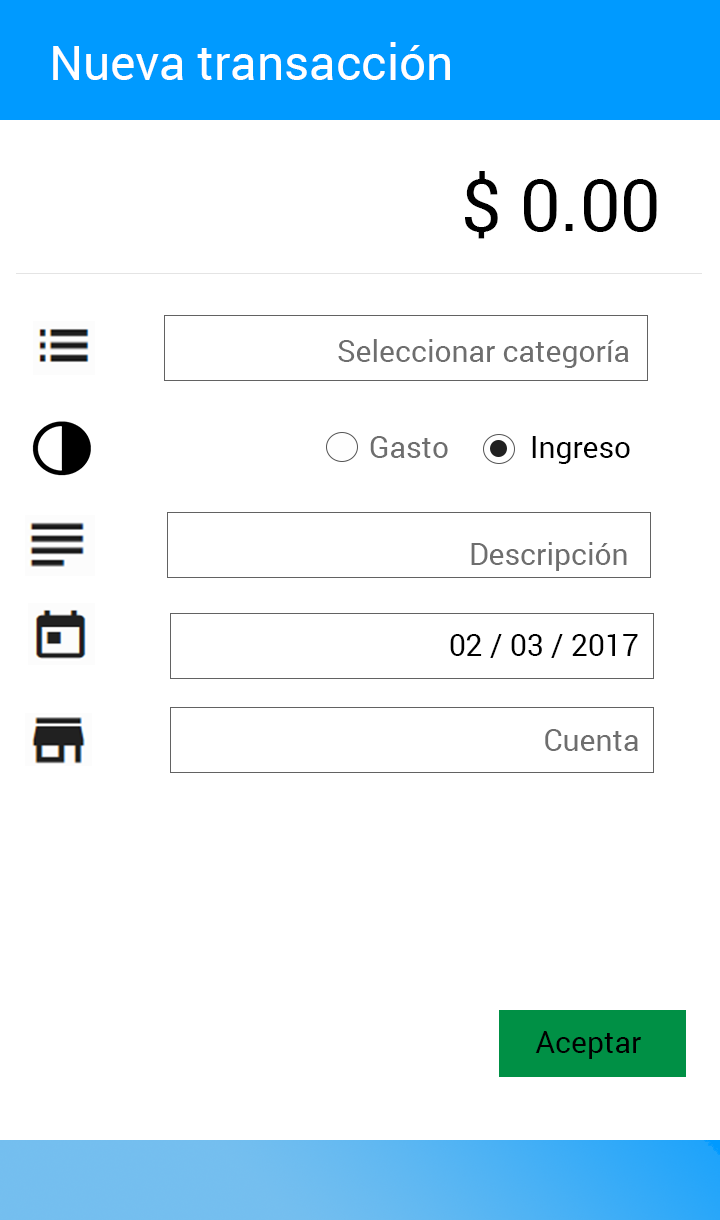
<style>
.page{position:relative;width:720px;height:1220px;background:#ffffff}
.page>*{position:absolute;margin:0}
.t1{font:48px "Roboto-Regular";color:#ffffff}
.t2{font:72px "Roboto-Regular";color:#000000}
.t3{font:30px "Roboto-Regular";color:#6e6e6e}
.t4{font:30px "Roboto-Regular";color:#000000}
</style>
<div class="page">
<p class="t1" style="left:53px;top:42px;width:397px;height:38px">Nueva transacción</p>
<p class="t2" style="left:465px;top:171px;width:192px;height:68px">$ 0.00</p>
<p class="t3" style="left:338px;top:339px;width:291px;height:29px">Seleccionar categoría</p>
<p class="t3" style="left:370px;top:436px;width:78px;height:22px">Gasto</p>
<p class="t4" style="left:532px;top:436px;width:98px;height:28px">Ingreso</p>
<p class="t3" style="left:471px;top:542px;width:156px;height:29px">Descripción</p>
<p class="t4" style="left:450px;top:634px;width:188px;height:24px">02 / 03 / 2017</p>
<p class="t3" style="left:545px;top:729px;width:93px;height:22px">Cuenta</p>
<p class="t4" style="left:535px;top:1031px;width:106px;height:28px">Aceptar</p>
</div>
